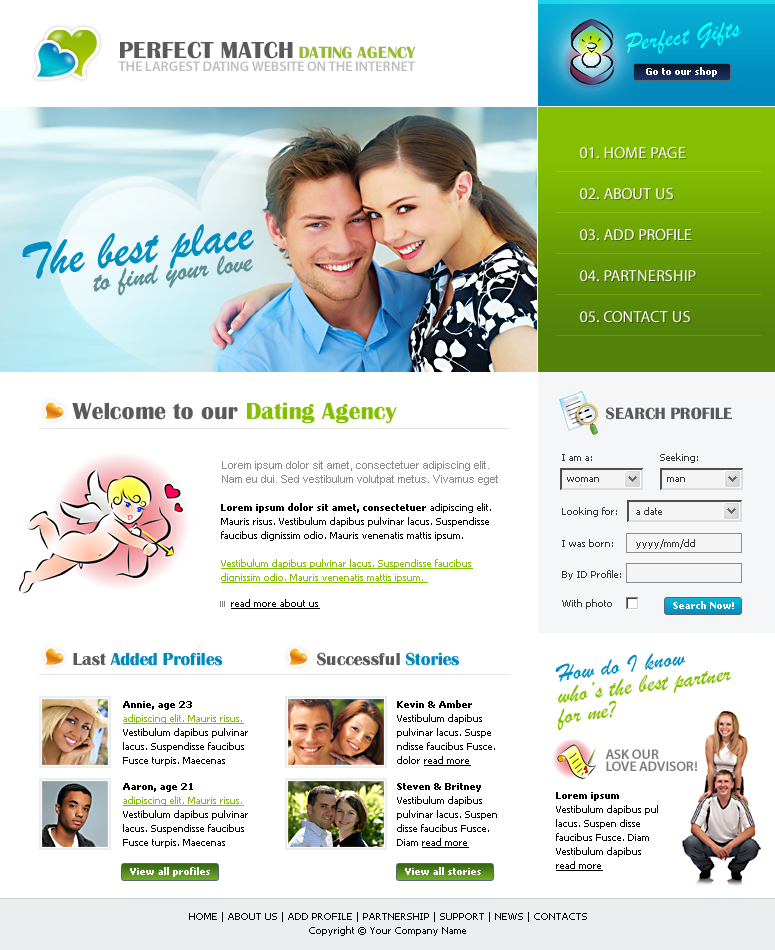
<style>
.page{position:relative;width:775px;height:950px;background:#ffffff}
.page>*{position:absolute;margin:0}
.t1{font:27px "BrushScriptMT";color:#0affff}
.t2{font:24px "BritannicBold";color:#5a5a5a;text-transform:uppercase}
.t3{font:17px "BritannicBold";color:#97ba3a;text-transform:uppercase}
.t4{font:14px "MyriadPro-Semibold";color:#bdbdbd;text-transform:uppercase}
.t5{font:10px "Tahoma-Bold";color:#ffffff}
.t6{font:16px "MyriadPro-Regular";color:#ffffff;text-transform:uppercase}
.t7{font:51px "BrushScriptMT";color:#018dbf}
.t8{font:31px "BrushScriptMT";color:#5a8e95}
.t9{font:24px "BritannicBold";color:#5a5a5a}
.t10{font:24px "BritannicBold";color:#84bf01}
.t11{font:17px "BritannicBold";color:#5a5a5a;text-transform:uppercase}
.t12{font:11px/14px "ArialMT";color:#898a8b}
.t13{font:10px "Tahoma";color:#353739}
.t14{font:10px/14px "Tahoma";color:#000000}
.t15{font:10px/14px "Tahoma-Bold";color:#000000}
.t16{font:10px/14px "Tahoma";color:#84bf01;text-decoration:underline}
.t17{font:10px "Tahoma";color:#000000;text-decoration:underline}
.t18{font:18px "BritannicBold";color:#0089bc}
.t19{font:18px "BritannicBold";color:#5a5a5a}
.t20{font:25px "BrushScriptMT";color:#018dbf}
.t21{font:25px "BrushScriptMT";color:#84bf01}
.t22{font:10px/14px "Tahoma";color:#000000;text-decoration:underline}
.t23{font:14px/12.2px "MyriadPro-Semibold";color:#7b7b7b;text-transform:uppercase}
</style>
<div class="page">
<p class="t1" style="left:625px;top:22px;width:116px;height:32px;rotate:-7deg">Perfect Gifts</p>
<p class="t2" style="left:120px;top:41px;width:173px;height:18px">perfect match</p>
<p class="t3" style="left:299px;top:46px;width:117px;height:13px">DATING AGENCY</p>
<p class="t4" style="left:118px;top:61px;width:297px;height:10px">THE LARGEST DATING WEBSITE ON THE INTERNET</p>
<p class="t5" style="left:646px;top:67px;width:71px;height:10px">Go to our shop</p>
<p class="t6" style="left:580px;top:147px;width:106px;height:12px">01. HOME PAGE</p>
<p class="t6" style="left:580px;top:188px;width:93px;height:12px">02. ABOUT US</p>
<p class="t7" style="left:22px;top:224px;width:232px;height:55px;rotate:-7deg">The best place</p>
<p class="t6" style="left:580px;top:229px;width:112px;height:12px">03. ADD PROFILE</p>
<p class="t8" style="left:93px;top:255px;width:160px;height:41px;rotate:-7deg">to find your love</p>
<p class="t6" style="left:580px;top:270px;width:116px;height:12px">04. PARTNERSHIP</p>
<p class="t6" style="left:580px;top:311px;width:110px;height:12px">05. CONTACT US</p>
<p class="t9" style="left:72px;top:402px;width:325px;height:22px">Welcome to our <span class="t10">Dating Agency</span></p>
<p class="t11" style="left:606px;top:407px;width:126px;height:13px">SEARCH PROFILE</p>
<p class="t12" style="left:222px;top:461px;width:276px;height:24px">Lorem ipsum dolor sit amet, consectetuer adipiscing elit. Nam eu dui. Sed vestibulum volutpat metus. Vivamus eget</p>
<p class="t13" style="left:562px;top:454px;width:30px;height:7px">I am a:</p>
<p class="t13" style="left:660px;top:453px;width:38px;height:10px">Seeking:</p>
<p class="t13" style="left:567px;top:477px;width:32px;height:5px">woman</p>
<p class="t13" style="left:667px;top:477px;width:18px;height:5px">man</p>
<p class="t14" style="left:221px;top:503px;width:270px;height:38px"><span class="t15">Lorem ipsum dolor sit amet, consectetuer</span> adipiscing elit. Mauris risus. Vestibulum dapibus pulvinar lacus. Suspendisse faucibus dignissim odio. Mauris venenatis mattis ipsum.</p>
<p class="t13" style="left:562px;top:507px;width:55px;height:10px">Looking for:</p>
<p class="t13" style="left:636px;top:507px;width:26px;height:8px">a date</p>
<p class="t13" style="left:562px;top:539px;width:51px;height:8px">I was born:</p>
<p class="t13" style="left:636px;top:539px;width:59px;height:10px">yyyy/mm/dd</p>
<p class="t16" style="left:221px;top:559px;width:252px;height:24px">Vestibulum dapibus pulvinar lacus. Suspendisse faucibus dignissim odio. Mauris venenatis mattis ipsum.</p>
<p class="t13" style="left:562px;top:570px;width:59px;height:10px">By ID Profile:</p>
<p class="t17" style="left:231px;top:599px;width:89px;height:10px">read more about us</p>
<p class="t13" style="left:562px;top:599px;width:50px;height:10px">With photo</p>
<p class="t5" style="left:673px;top:601px;width:61px;height:8px">Search Now!</p>
<p class="t18" style="left:73px;top:652px;width:150px;height:14px"><span class="t19">Last </span>Added Profiles</p>
<p class="t19" style="left:317px;top:652px;width:142px;height:14px">Successful <span class="t18">Stories</span></p>
<p class="t20" style="left:555px;top:653px;width:130px;height:29px;rotate:-7deg">How do I know</p>
<p class="t21" style="left:558px;top:671px;width:174px;height:32px;rotate:-7deg">who’s the best partner</p>
<p class="t14" style="left:123px;top:701px;width:125px;height:65px"><span class="t15">Annie, age 23 <br></span><span class="t16">adipiscing elit. Mauris risus. </span>Vestibulum dapibus pulvinar lacus. Suspendisse faucibus Fusce turpis. Maecenas</p>
<p class="t14" style="left:397px;top:700px;width:98px;height:66px"><span class="t15">Kevin &amp; Amber <br></span>Vestibulum dapibus pulvinar lacus. Suspe ndisse faucibus Fusce. dolor <span class="t22">read more</span></p>
<p class="t21" style="left:558px;top:700px;width:59px;height:31px;rotate:-7deg">for me?</p>
<p class="t23" style="left:605px;top:749px;width:92px;height:22px">ASK OUR <br>LOVE ADVISOR!</p>
<p class="t14" style="left:123px;top:783px;width:125px;height:65px"><span class="t15">Aaron, age 21 <br></span><span class="t16">adipiscing elit. Mauris risus. </span>Vestibulum dapibus pulvinar lacus. Suspendisse faucibus Fusce turpis. Maecenas</p>
<p class="t14" style="left:397px;top:783px;width:100px;height:65px"><span class="t15">Steven &amp; Britney<br></span>Vestibulum dapibus pulvinar lacus. Suspen disse faucibus Fusce. Diam <span class="t22">read more</span></p>
<p class="t14" style="left:556px;top:792px;width:102px;height:79px"><span class="t15">Lorem ipsum<br></span>Vestibulum dapibus pul lacus. Suspen disse faucibus Fusce. Diam Vestibulum dapibus   <span class="t22">read more</span></p>
<p class="t5" style="left:130px;top:867px;width:80px;height:10px">View all profiles</p>
<p class="t5" style="left:405px;top:867px;width:76px;height:8px">View all stories</p>
<p class="t14" style="left:189px;top:912px;width:398px;height:24px;text-align:center">HOME | ABOUT US | ADD PROFILE | PARTNERSHIP | SUPPORT | NEWS | CONTACTS<br>Copyright © Your Company Name</p>
</div>
